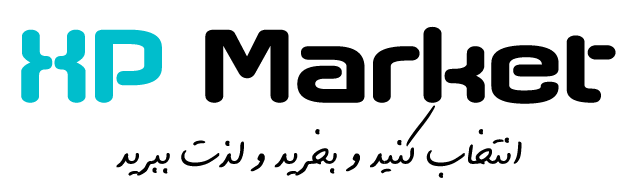
<style>
.page{position:relative;width:638px;height:180px;background:#ffffff}
.page>*{position:absolute;margin:0}
.t1{font:140px "Axaxax";color:#00becc}
.t2{font:140px "Axaxax";color:#000000}
.t3{font:60px "BShekari";color:#000000}
</style>
<div class="page">
<p class="t1" style="left:21px;top:29px;width:141px;height:74px">XP</p>
<p class="t2" style="left:205px;top:26px;width:411px;height:78px">Market</p>
<p class="t3" style="left:116px;top:105px;width:406px;height:73px">انتخاب کنید و بخرید و لذت ببرید</p>
</div>
